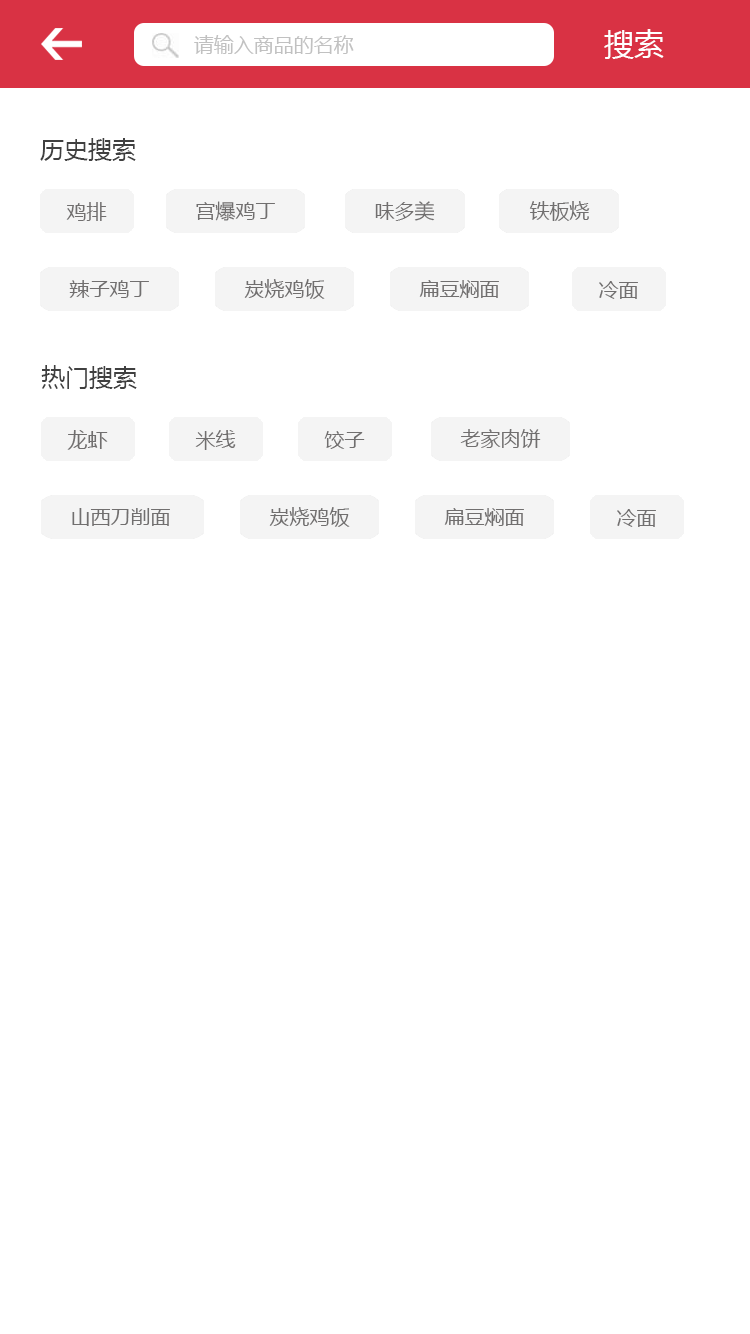
<style>
.page{position:relative;width:750px;height:1334px;background:#ffffff}
.page>*{position:absolute;margin:0}
.t1{font:30px "MicrosoftYaHei";color:#ffffff}
.t2{font:20px "MicrosoftYaHei";color:#c1c1c1}
.t3{font:24px "MicrosoftYaHei";color:#404040}
.t4{font:20px "MicrosoftYaHei";color:#716f6f}
</style>
<div class="page">
<p class="t1" style="left:604px;top:29px;width:60px;height:30px">搜索</p>
<p class="t2" style="left:194px;top:35px;width:160px;height:19px">请输入商品的名称</p>
<p class="t3" style="left:40px;top:138px;width:96px;height:23px">历史搜索</p>
<p class="t4" style="left:66px;top:202px;width:41px;height:19px">鸡排</p>
<p class="t4" style="left:196px;top:201px;width:79px;height:20px">宫爆鸡丁</p>
<p class="t4" style="left:375px;top:201px;width:60px;height:20px">味多美</p>
<p class="t4" style="left:529px;top:201px;width:61px;height:20px">铁板烧</p>
<p class="t4" style="left:69px;top:280px;width:80px;height:18px">辣子鸡丁</p>
<p class="t4" style="left:244px;top:279px;width:81px;height:20px">炭烧鸡饭</p>
<p class="t4" style="left:419px;top:280px;width:80px;height:18px">扁豆焖面</p>
<p class="t4" style="left:599px;top:281px;width:39px;height:18px">冷面</p>
<p class="t3" style="left:41px;top:365px;width:96px;height:24px">热门搜索</p>
<p class="t4" style="left:67px;top:430px;width:41px;height:20px">龙虾</p>
<p class="t4" style="left:195px;top:430px;width:41px;height:20px">米线</p>
<p class="t4" style="left:324px;top:431px;width:41px;height:18px">饺子</p>
<p class="t4" style="left:460px;top:429px;width:81px;height:19px">老家肉饼</p>
<p class="t4" style="left:72px;top:508px;width:98px;height:18px">山西刀削面</p>
<p class="t4" style="left:269px;top:507px;width:81px;height:20px">炭烧鸡饭</p>
<p class="t4" style="left:444px;top:508px;width:80px;height:18px">扁豆焖面</p>
<p class="t4" style="left:617px;top:509px;width:39px;height:18px">冷面</p>
</div>
